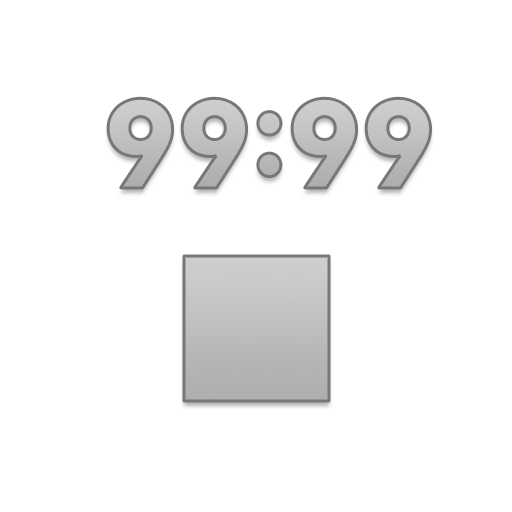
<style>
.page{position:relative;width:512px;height:512px;background:#ffffff}
.page>*{position:absolute;margin:0}
.t1{font:120px "HarmonyOS_Sans_SC_Black";color:#bfbfbf}
</style>
<div class="page">
<p class="t1" style="left:108px;top:98px;width:323px;height:90px">99:99</p>
</div>
